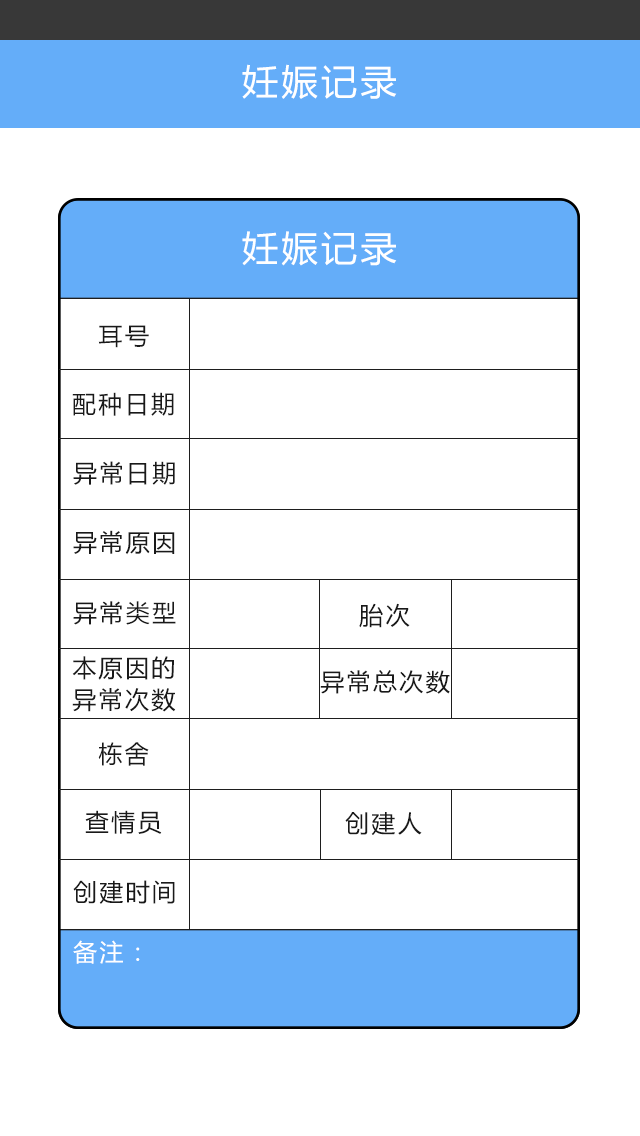
<style>
.page{position:relative;width:640px;height:1136px;background:#ffffff}
.page>*{position:absolute;margin:0}
.t1{font:36px "MicrosoftYaHei";letter-spacing:0.1em;color:#ffffff}
.t2{font:24px "MicrosoftYaHei";letter-spacing:0.1em;color:#191919}
.t3{font:24px "MicrosoftYaHei";letter-spacing:0.1em;color:#ffffff}
</style>
<div class="page">
<p class="t1" style="left:242px;top:64px;width:155px;height:35px">妊娠记录</p>
<p class="t1" style="left:242px;top:231px;width:155px;height:35px">妊娠记录</p>
<p class="t2" style="left:98px;top:325px;width:51px;height:23px">耳号</p>
<p class="t2" style="left:72px;top:392px;width:102px;height:24px">配种日期</p>
<p class="t2" style="left:73px;top:461px;width:102px;height:24px">异常日期</p>
<p class="t2" style="left:73px;top:530px;width:102px;height:25px">异常原因</p>
<p class="t2" style="left:73px;top:601px;width:103px;height:24px">异常类型</p>
<p class="t2" style="left:359px;top:603px;width:51px;height:25px">胎次</p>
<p class="t2" style="left:72px;top:656px;width:102px;height:24px">本原因的</p>
<p class="t2" style="left:320px;top:670px;width:130px;height:24px">异常总次数</p>
<p class="t2" style="left:72px;top:688px;width:104px;height:24px">异常次数</p>
<p class="t2" style="left:98px;top:742px;width:51px;height:24px">栋舍</p>
<p class="t2" style="left:85px;top:810px;width:77px;height:24px">查情员</p>
<p class="t2" style="left:345px;top:812px;width:77px;height:23px">创建人</p>
<p class="t2" style="left:73px;top:880px;width:102px;height:24px">创建时间</p>
<p class="t3" style="left:73px;top:940px;width:67px;height:24px">备注：</p>
</div>
